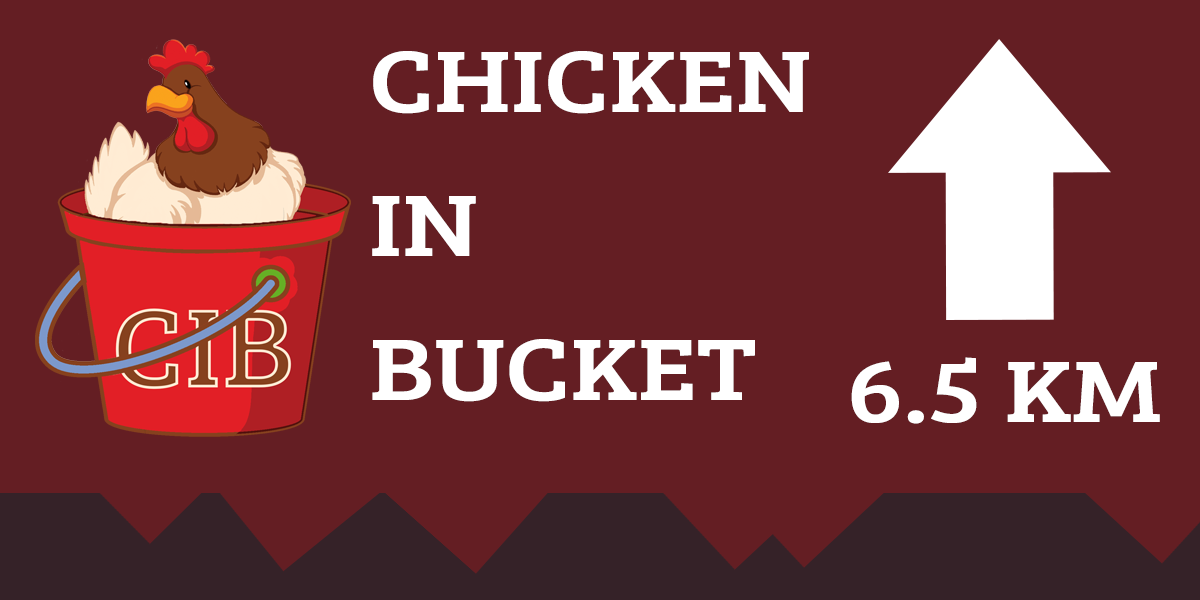
<style>
.page{position:relative;width:1200px;height:600px;background:#641e23}
.page>*{position:absolute;margin:0}
.t1{font:90px "BreeSerif-Regular";color:#ffffff;scale:1.2 1}
</style>
<div class="page">
<p class="t1" style="left:372px;top:51px;width:437px;height:351px">CHICKEN<br>IN<br>BUCKET</p>
<p class="t1" style="left:851px;top:357px;width:309px;height:67px">6.5 KM</p>
</div>
